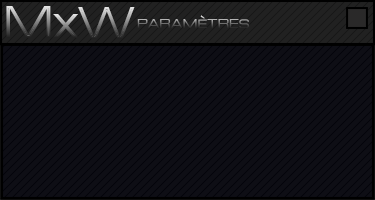
<style>
.page{position:relative;width:375px;height:200px;background:#0e0e15}
.page>*{position:absolute;margin:0}
.t1{font:42.6px "Michroma";scale:0.87 1}
.t2{font:41.8px "Michroma";scale:0.87 1}
.t3{font:11px "Michroma"}
</style>
<div class="page">
<p class="t1" style="left:6px;top:6px;width:45px;height:32px">M</p>
<p class="t1" style="left:52px;top:14px;width:27px;height:24px">x</p>
<p class="t2" style="left:78px;top:7px;width:57px;height:32px">W</p>
<p class="t3" style="left:137px;top:15px;width:112px;height:14px">PARAMÈTRES</p>
</div>
